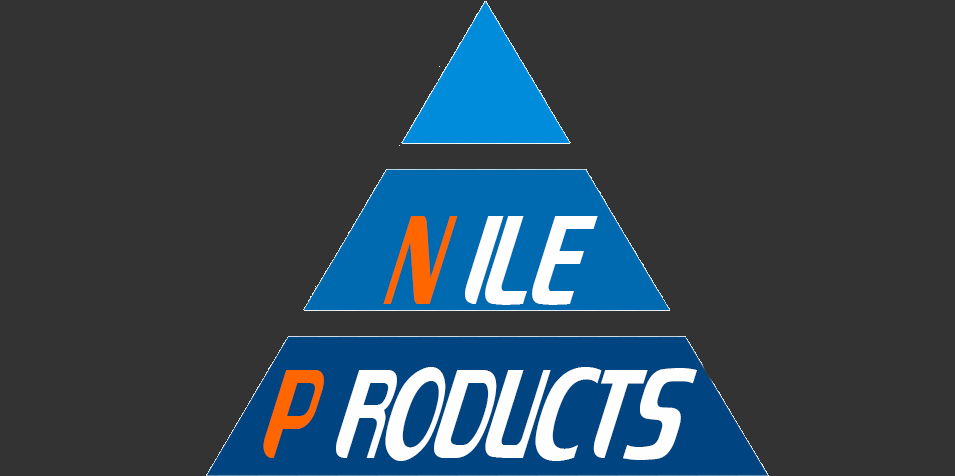
<style>
.page{position:relative;width:955px;height:476px;background:#333333}
.page>*{position:absolute;margin:0}
.t1{font:134.5px "NEC";color:#fefefe;scale:0.38 1}
.t2{font:134.5px "NEC";color:#ff6600;scale:0.38 1}
</style>
<div class="page">
<p class="t1" style="left:263px;top:216px;width:434px;height:245px"><span class="t2">   n </span>ile<br><span class="t2">p </span>roducts</p>
</div>
